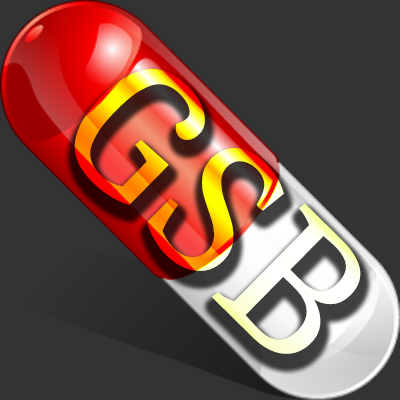
<style>
.page{position:relative;width:400px;height:400px;background:#333333}
.page>*{position:absolute;margin:0}
.t1{font:197.3px "Caladea-Regular";letter-spacing:0.01em}
</style>
<div class="page">
<p class="t1" style="left:74px;top:68px;width:287px;height:286px;rotate:45deg">GSB</p>
</div>
